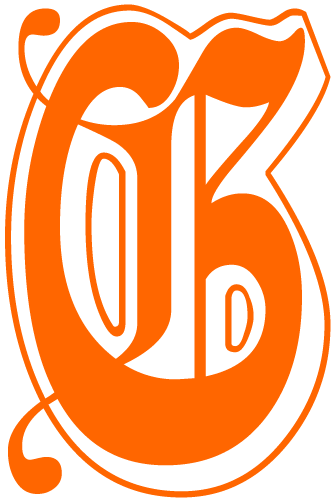
<style>
.page{position:relative;width:335px;height:500px;background:#ffffff}
.page>*{position:absolute;margin:0}
.t1{font:583px "Pamela";color:#ff6600}
</style>
<div class="page">
<p class="t1" style="left:5px;top:4px;width:326px;height:494px">G</p>
</div>
